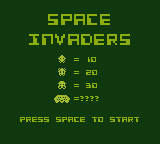
<style>
.page{position:relative;width:160px;height:144px;background:#0f380f}
.page>*{position:absolute;margin:0}
.t1{font:16.7px "CosmicAlien";color:#8cad0f}
.t2{font:8.3px "CosmicAlien";color:#8cad0f}
</style>
<div class="page">
<p class="t1" style="left:29px;top:14px;width:101px;height:31px;text-align:center">space <br>invaders</p>
<p class="t2" style="left:74px;top:57px;width:22px;height:5px">= 10</p>
<p class="t2" style="left:74px;top:70px;width:23px;height:5px">= 20</p>
<p class="t2" style="left:74px;top:83px;width:23px;height:5px">= 30</p>
<p class="t2" style="left:74px;top:96px;width:25px;height:5px">=????</p>
<p class="t2" style="left:20px;top:117px;width:119px;height:5px"><span class="t1"> </span>Press space to start</p>
</div>
